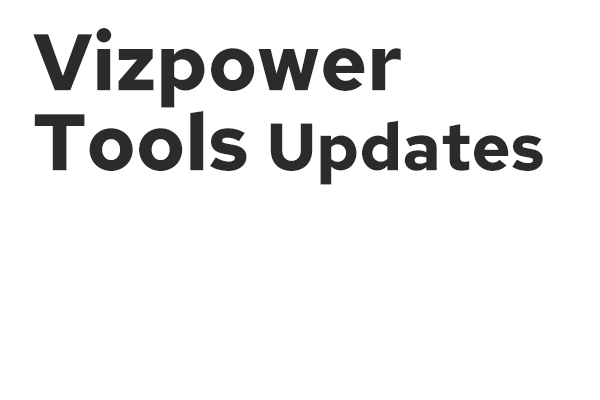
<style>
.page{position:relative;width:600px;height:400px;background:#ffffff}
.page>*{position:absolute;margin:0}
.t1{font:80px/80px "RedHatText-Bold";color:#2b2b2b}
.t2{font:66.7px/80px "RedHatText-Bold";color:#2b2b2b}
</style>
<div class="page">
<p class="t1" style="left:33px;top:28px;width:510px;height:157px">Vizpower<br>Tools <span class="t2">Updates</span></p>
</div>
